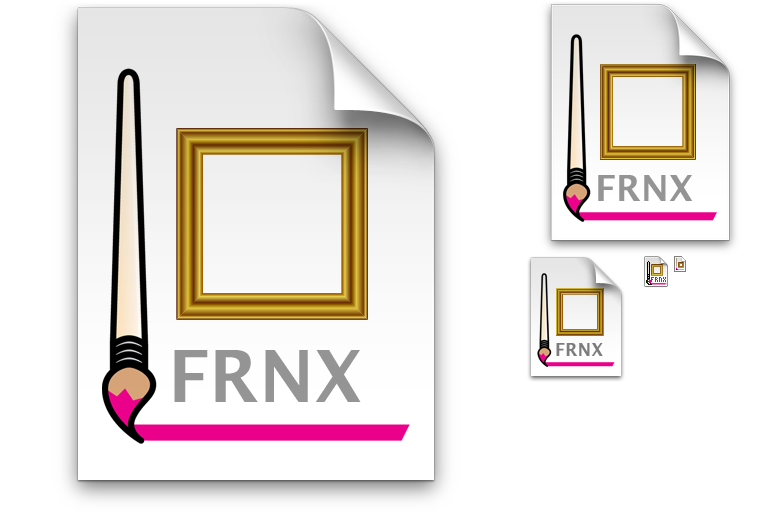
<style>
.page{position:relative;width:768px;height:512px;background:#ffffff}
.page>*{position:absolute;margin:0}
.t1{font:36px "LucidaGrande-Bold";color:#959595}
.t2{font:7px "KKFixed4x7";color:#555555}
.t3{font:72px "LucidaGrande-Bold";color:#959595}
.t4{font:18px "LucidaGrande-Bold";color:#7d7d7d}
</style>
<div class="page">
<p class="t1" style="left:598px;top:175px;width:95px;height:26px">FRNX</p>
<p class="t2" style="left:651px;top:277px;width:15px;height:5px">FRNX</p>
<p class="t3" style="left:174px;top:350px;width:187px;height:52px">FRNX</p>
<p class="t4" style="left:556px;top:343px;width:47px;height:13px">FRNX</p>
</div>
